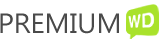
<style>
.page{position:relative;width:161px;height:45px;background:#ffffff}
.page>*{position:absolute;margin:0}
.t1{font:28px "NirmalaUI";color:#4a4a4a}
</style>
<div class="page">
<p class="t1" style="left:0px;top:13px;width:119px;height:21px">PREMIUM</p>
</div>
